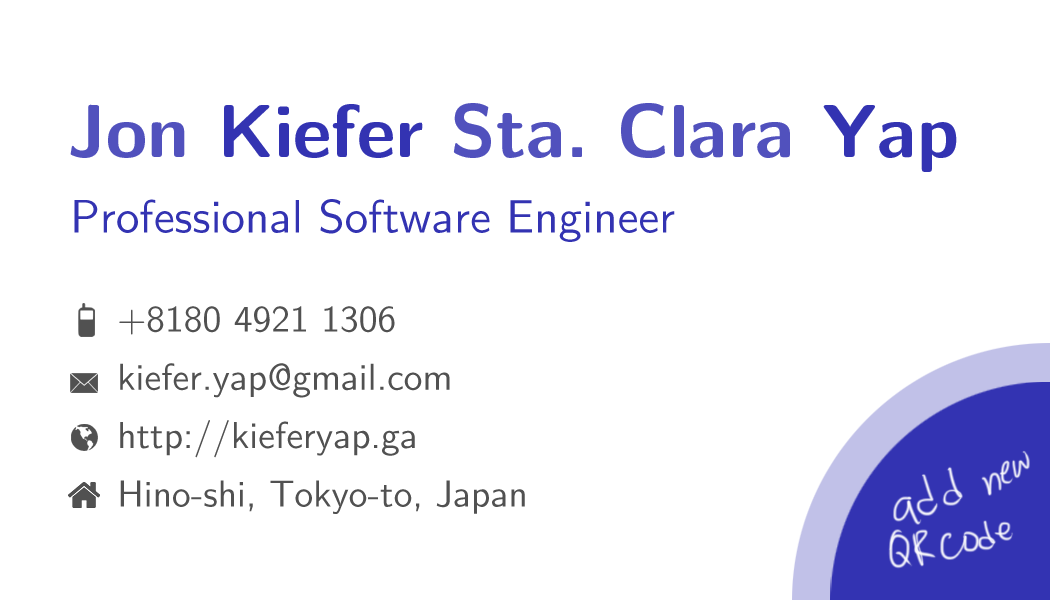
<style>
.page{position:relative;width:1050px;height:600px;background:#ffffff}
.page>*{position:absolute;margin:0}
.t1{font:75px "LMSans10-Bold"}
.t2{font:46.9px "LMSans10-Regular";color:#3333b2}
.t3{font:37.5px/58.3px "LMSans10-Regular";color:#515151}
</style>
<div class="page">
<p class="t1" style="left:70px;top:103px;width:887px;height:69px">Jon Kiefer Sta. Clara Yap</p>
<p class="t1" style="left:70px;top:103px;width:887px;height:69px">Jon Kiefer Sta. Clara Yap</p>
<p class="t2" style="left:74px;top:199px;width:601px;height:43px">Professional Software Engineer</p>
<p class="t3" style="left:119px;top:306px;width:406px;height:208px">+8180 4921 1306<br>kiefer.yap@gmail.com<br>http://kieferyap.ga<br>Hino-shi, Tokyo-to, Japan</p>
</div>
